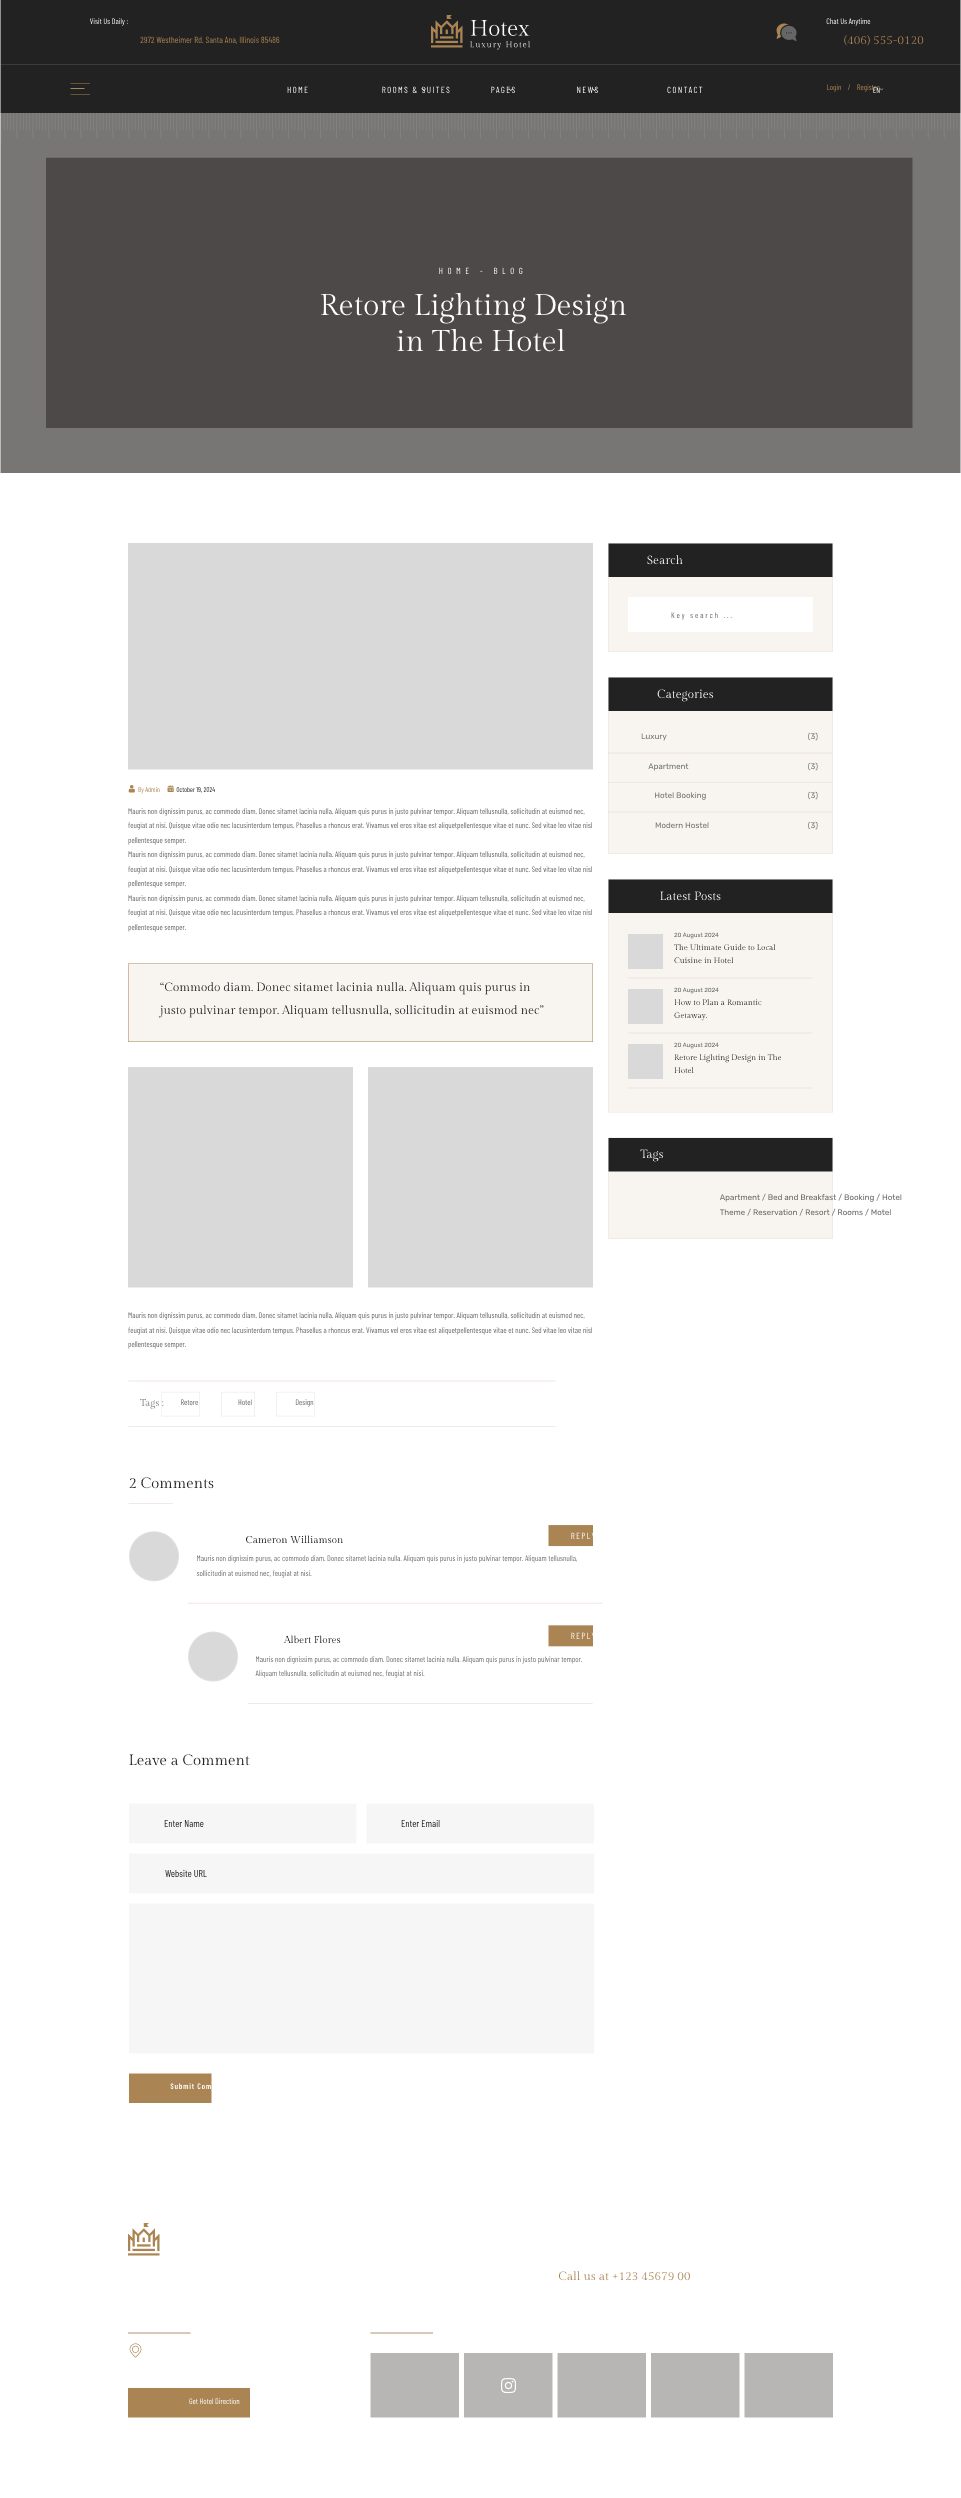
<style>
.page{position:relative;width:961px;height:2498px;background:#ffffff}
.page>*{position:absolute;margin:0}
.t1{font:8px "BarlowCondensed-Regular"}
.t2{font:9px "BarlowCondensed-Regular";color:#aa8453}
.t3{font:12px "GildaDisplay-Regular";color:#aa8453}
.t4{font:9px "BarlowCondensed-Regular";letter-spacing:0.15em;text-transform:uppercase}
.t5{font:9px "BarlowCondensed-Regular";letter-spacing:0.5em;text-transform:uppercase}
.t6{font:30px "GildaDisplay-Regular";color:#ffffff}
.t7{font:12px "GildaDisplay-Regular";color:#ffffff}
.t8{font:8px "BarlowCondensed-Regular";letter-spacing:0.24em}
.t9{font:12px "GildaDisplay-Regular"}
.t10{font:8px "Rubik-Regular";color:#707070}
.t11{font:8px "Rubik-Regular"}
.t12{font:7px "BarlowCondensed-Regular"}
.t13{font:8px/14.5px "BarlowCondensed-Regular"}
.t14{font:6px "Rubik-Regular"}
.t15{font:8px/13px "GildaDisplay-Regular"}
.t16{font:12px/22.5px "GildaDisplay-Regular";color:#222222}
.t17{font:8px "Rubik-Regular";color:#666666}
.t18{font:8px/15px "Rubik-Regular";color:#666666}
.t19{font:10px "GildaDisplay-Regular"}
.t20{font:15px "GildaDisplay-Regular";color:#222222}
.t21{font:10px "BarlowCondensed-Regular"}
.t22{font:10px "BarlowCondensed-Regular";color:#222222}
.t23{font:8px "BarlowCondensed-SemiBold";letter-spacing:0.1em;color:#ffffff}
</style>
<div class="page">
<p class="t1" style="left:90px;top:18px;width:38px;height:8px">Visit Us Daily :</p>
<p class="t1" style="left:826px;top:18px;width:45px;height:8px">Chat Us Anytime</p>
<p class="t2" style="left:140px;top:36px;width:140px;height:8px">2972 Westheimer Rd. Santa Ana, Illinois 85486</p>
<p class="t3" style="left:844px;top:35px;width:80px;height:11px">(406) 555-0120</p>
<p class="t4" style="left:287px;top:86px;width:21px;height:8px">Home</p>
<p class="t4" style="left:382px;top:86px;width:68px;height:8px">Rooms &amp; Suites</p>
<p class="t4" style="left:491px;top:86px;width:24px;height:8px">Pages</p>
<p class="t4" style="left:577px;top:86px;width:21px;height:8px">News</p>
<p class="t4" style="left:667px;top:86px;width:36px;height:8px">Contact</p>
<p class="t1" style="left:827px;top:84px;width:53px;height:8px">Login    /    Register</p>
<p class="t1" style="left:873px;top:87px;width:7px;height:6px">EN</p>
<p class="t5" style="left:439px;top:267px;width:84px;height:8px">Home - Blog</p>
<p class="t6" style="left:320px;top:292px;width:307px;height:60px;text-align:center">Retore Lighting Design  <br>in The Hotel</p>
<p class="t7" style="left:647px;top:555px;width:36px;height:10px">Search</p>
<p class="t8" style="left:671px;top:612px;width:61px;height:8px">Key search ...</p>
<p class="t9" style="left:657px;top:689px;width:57px;height:13px">Categories</p>
<p class="t10" style="left:641px;top:733px;width:26px;height:8px">Luxury</p>
<p class="t11" style="left:808px;top:732px;width:10px;height:9px">(3)</p>
<p class="t11" style="left:648px;top:763px;width:41px;height:8px">Apartment</p>
<p class="t11" style="left:808px;top:762px;width:10px;height:9px">(3)</p>
<p class="t12" style="left:138px;top:787px;width:22px;height:7px">By Admin</p>
<p class="t12" style="left:176px;top:787px;width:39px;height:6px">October 19, 2024</p>
<p class="t11" style="left:654px;top:792px;width:52px;height:8px">Hotel Booking</p>
<p class="t11" style="left:808px;top:791px;width:10px;height:9px">(3)</p>
<p class="t13" style="left:128px;top:808px;width:464px;height:124px">Mauris non dignissim purus, ac commodo diam. Donec sitamet lacinia nulla. Aliquam quis purus in justo pulvinar tempor. Aliquam tellusnulla, sollicitudin at euismod nec, feugiat at nisi. Quisque vitae odio nec lacusinterdum tempus. Phasellus a rhoncus erat. Vivamus vel eros vitae est aliquetpellentesque vitae et nunc. Sed vitae leo vitae nisl pellentesque semper.<br>Mauris non dignissim purus, ac commodo diam. Donec sitamet lacinia nulla. Aliquam quis purus in justo pulvinar tempor. Aliquam tellusnulla, sollicitudin at euismod nec, feugiat at nisi. Quisque vitae odio nec lacusinterdum tempus. Phasellus a rhoncus erat. Vivamus vel eros vitae est aliquetpellentesque vitae et nunc. Sed vitae leo vitae nisl pellentesque semper.<br>Mauris non dignissim purus, ac commodo diam. Donec sitamet lacinia nulla. Aliquam quis purus in justo pulvinar tempor. Aliquam tellusnulla, sollicitudin at euismod nec, feugiat at nisi. Quisque vitae odio nec lacusinterdum tempus. Phasellus a rhoncus erat. Vivamus vel eros vitae est aliquetpellentesque vitae et nunc. Sed vitae leo vitae nisl pellentesque semper.</p>
<p class="t10" style="left:655px;top:822px;width:54px;height:7px">Modern Hostel</p>
<p class="t11" style="left:808px;top:821px;width:10px;height:9px">(3)</p>
<p class="t7" style="left:660px;top:891px;width:61px;height:10px">Latest Posts</p>
<p class="t14" style="left:674px;top:932px;width:45px;height:7px">20 August 2024</p>
<p class="t15" style="left:674px;top:944px;width:102px;height:20px">The Ultimate Guide to Local Cuisine in Hotel</p>
<p class="t16" style="left:158px;top:982px;width:386px;height:36px">“Commodo diam. Donec sitamet lacinia nulla. Aliquam quis purus in justo pulvinar tempor. Aliquam tellusnulla, sollicitudin at euismod nec”</p>
<p class="t14" style="left:674px;top:987px;width:45px;height:7px">20 August 2024</p>
<p class="t15" style="left:674px;top:999px;width:88px;height:22px">How to Plan a Romantic Getaway.</p>
<p class="t14" style="left:674px;top:1042px;width:45px;height:7px">20 August 2024</p>
<p class="t15" style="left:674px;top:1054px;width:108px;height:20px">Retore Lighting Design in The Hotel</p>
<p class="t9" style="left:640px;top:1149px;width:24px;height:13px">Tags</p>
<p class="t17" style="left:719px;top:1193px;width:183px;height:23px">Apartment / Bed and Breakfast / Booking / Hotel<br><span class="t18">Theme / Reservation / Resort / Rooms / Motel</span></p>
<p class="t13" style="left:128px;top:1312px;width:464px;height:37px">Mauris non dignissim purus, ac commodo diam. Donec sitamet lacinia nulla. Aliquam quis purus in justo pulvinar tempor. Aliquam tellusnulla, sollicitudin at euismod nec, feugiat at nisi. Quisque vitae odio nec lacusinterdum tempus. Phasellus a rhoncus erat. Vivamus vel eros vitae est aliquetpellentesque vitae et nunc. Sed vitae leo vitae nisl pellentesque semper.</p>
<p class="t19" style="left:140px;top:1399px;width:24px;height:10px">Tags :</p>
<p class="t1" style="left:181px;top:1399px;width:17px;height:7px">Retore</p>
<p class="t1" style="left:238px;top:1399px;width:14px;height:7px">Hotel</p>
<p class="t1" style="left:295px;top:1399px;width:19px;height:8px">Design</p>
<p class="t20" style="left:129px;top:1477px;width:85px;height:12px">2 Comments</p>
<p class="t19" style="left:246px;top:1535px;width:97px;height:9px">Cameron Williamson</p>
<p class="t4" style="left:571px;top:1532px;width:24px;height:7px">Reply</p>
<p class="t13" style="left:196px;top:1555px;width:381px;height:23px">Mauris non dignissim purus, ac commodo diam. Donec sitamet lacinia nulla. Aliquam quis purus in justo pulvinar tempor. Aliquam tellusnulla, sollicitudin at euismod nec, feugiat at nisi.</p>
<p class="t19" style="left:283px;top:1635px;width:58px;height:9px">Albert Flores</p>
<p class="t4" style="left:571px;top:1632px;width:24px;height:7px">Reply</p>
<p class="t13" style="left:255px;top:1656px;width:328px;height:22px">Mauris non dignissim purus, ac commodo diam. Donec sitamet lacinia nulla. Aliquam quis purus in justo pulvinar tempor. Aliquam tellusnulla, sollicitudin at euismod nec, feugiat at nisi.</p>
<p class="t20" style="left:129px;top:1754px;width:121px;height:12px">Leave a Comment</p>
<p class="t21" style="left:164px;top:1820px;width:40px;height:8px">Enter Name</p>
<p class="t21" style="left:401px;top:1819px;width:39px;height:9px">Enter Email</p>
<p class="t22" style="left:165px;top:1869px;width:42px;height:9px">Website URL</p>
<p class="t23" style="left:170px;top:2083px;width:59px;height:7px">Submit Comment</p>
<p class="t3" style="left:558px;top:2271px;width:132px;height:10px">Call us at +123 45679 00</p>
<p class="t1" style="left:189px;top:2398px;width:51px;height:7px">Get Hotel Direction</p>
</div>
